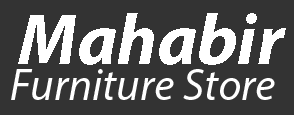
<style>
.page{position:relative;width:294px;height:115px;background:#333333}
.page>*{position:absolute;margin:0}
.t1{font:72px "MyriadPro-BoldIt";color:#ffffff}
.t2{font:45px "MyriadPro-It";color:#ffffff}
</style>
<div class="page">
<p class="t1" style="left:18px;top:13px;width:268px;height:52px">Mahabir</p>
<p class="t2" style="left:11px;top:69px;width:264px;height:31px">Furniture Store</p>
</div>
